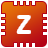
<style>
.page{position:relative;width:48px;height:48px;background:#ffffff}
.page>*{position:absolute;margin:0}
.t1{font:24px "Ubuntu-Regular";color:#ffffff}
</style>
<div class="page">
<p class="t1" style="left:17px;top:16px;width:13px;height:17px">Z</p>
</div>
